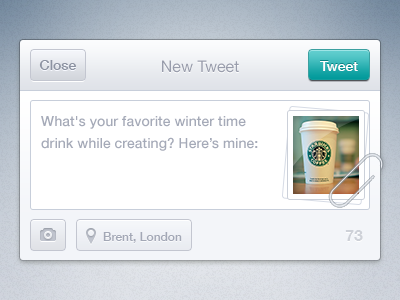
<style>
.page{position:relative;width:400px;height:300px;background:#ffffff}
.page>*{position:absolute;margin:0}
.t1{font:14px "HelveticaNeue-Medium";color:#8c92a1}
.t2{font:16px "HelveticaNeue";color:#999dac}
.t3{font:14px "HelveticaNeue-Medium";color:#ffffff}
.t4{font:14px/22px "HelveticaNeue-Medium";color:#a5aab8}
.t5{font:12px "HelveticaNeue-Medium";color:#a3a8b6}
.t6{font:16px "HelveticaNeue-Bold";color:#ced1d8}
</style>
<div class="page">
<p class="t1" style="left:39px;top:60px;width:37px;height:10px">Close</p>
<p class="t2" style="left:162px;top:60px;width:77px;height:13px">New Tweet</p>
<p class="t3" style="left:320px;top:61px;width:38px;height:10px">Tweet</p>
<p class="t4" style="left:41px;top:116px;width:217px;height:35px">What's your favorite winter time<br>drink while creating? Here’s mine:</p>
<p class="t5" style="left:103px;top:232px;width:79px;height:11px">Brent, London</p>
<p class="t6" style="left:345px;top:230px;width:18px;height:11px">73</p>
</div>
